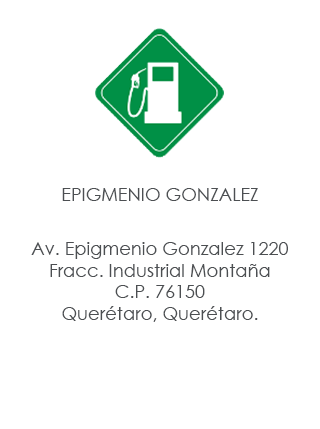
<style>
.page{position:relative;width:320px;height:429px;background:#ffffff}
.page>*{position:absolute;margin:0}
.t1{font:18px "CenturyGothic";color:#4c4f52}
</style>
<div class="page">
<p class="t1" style="left:62px;top:188px;width:196px;height:13px">EPIGMENIO GONZALEZ</p>
<p class="t1" style="left:31px;top:242px;width:257px;height:80px;text-align:center">Av. Epigmenio Gonzalez 1220<br>Fracc. Industrial Montaña<br>C.P. 76150<br>Querétaro, Querétaro.<br> <br>Querétaro, Querétaro.<br>Delegacion Carrillo Puerto<br>Queretaro, Queretaro.<br>Municipio Colon, Queretaro</p>
</div>
